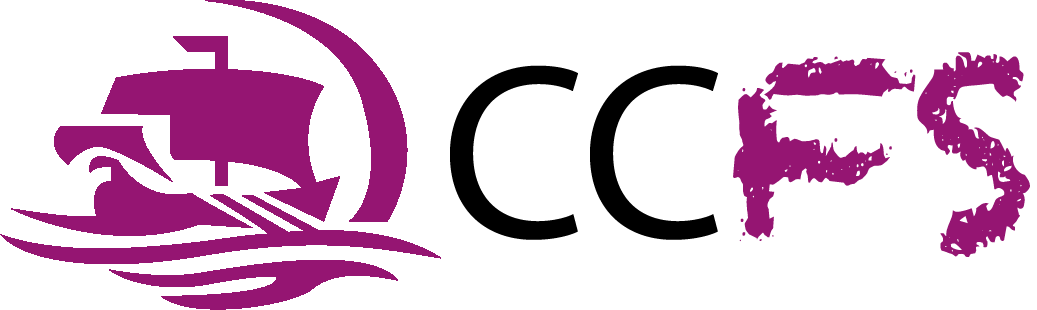
<style>
.page{position:relative;width:1037px;height:310px;background:#ffffff}
.page>*{position:absolute;margin:0}
.t1{font:250px "MyriadPro-Regular";color:#000000}
.t2{font:250px "Chalkduster";color:#951572}
</style>
<div class="page">
<p class="t1" style="left:450px;top:52px;width:580px;height:205px">CC<span class="t2">FS</span></p>
</div>
